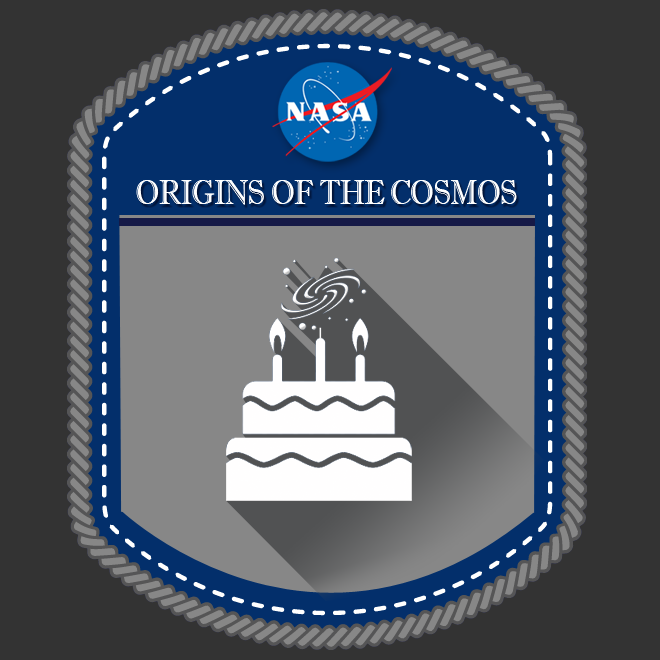
<style>
.page{position:relative;width:660px;height:660px;background:#333333}
.page>*{position:absolute;margin:0}
.t1{font:35px "ImprintMT-Shadow";letter-spacing:-0.025em;color:#ffffff;scale:0.83 1}
</style>
<div class="page">
<p class="t1" style="left:136px;top:180px;width:381px;height:25px">ORIGINS OF THE COSMOS</p>
</div>
